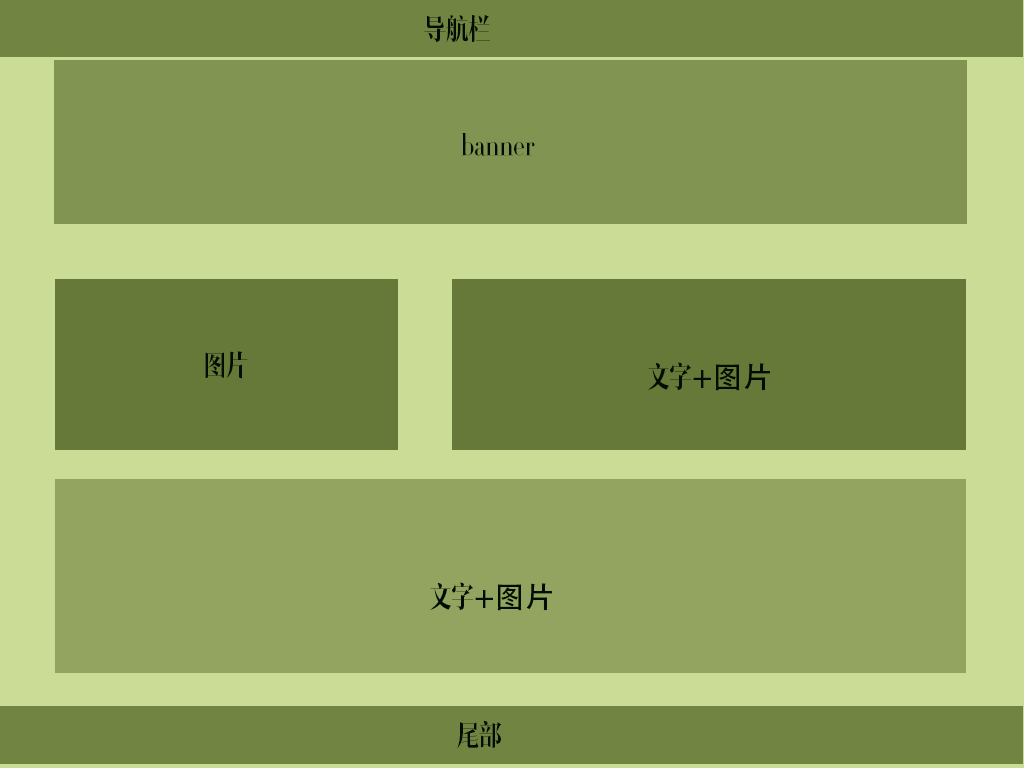
<style>
.page{position:relative;width:1024px;height:768px;background:#cadc95}
.page>*{position:absolute;margin:0}
.t1{font:30px "RTWSJyunYaDemo-Regular";color:#000d00}
.t2{font:30px "AdobeHeitiStd-Regular";color:#000d00}
</style>
<div class="page">
<p class="t1" style="left:424px;top:15px;width:66px;height:28px">导航栏</p>
<p class="t1" style="left:461px;top:133px;width:74px;height:23px">banner</p>
<p class="t1" style="left:205px;top:351px;width:43px;height:28px">图片</p>
<p class="t2" style="left:647px;top:362px;width:123px;height:29px"><span class="t1">文字</span>+图片</p>
<p class="t2" style="left:429px;top:582px;width:123px;height:29px"><span class="t1">文字</span>+图片</p>
<p class="t1" style="left:457px;top:720px;width:44px;height:29px">尾部</p>
</div>
